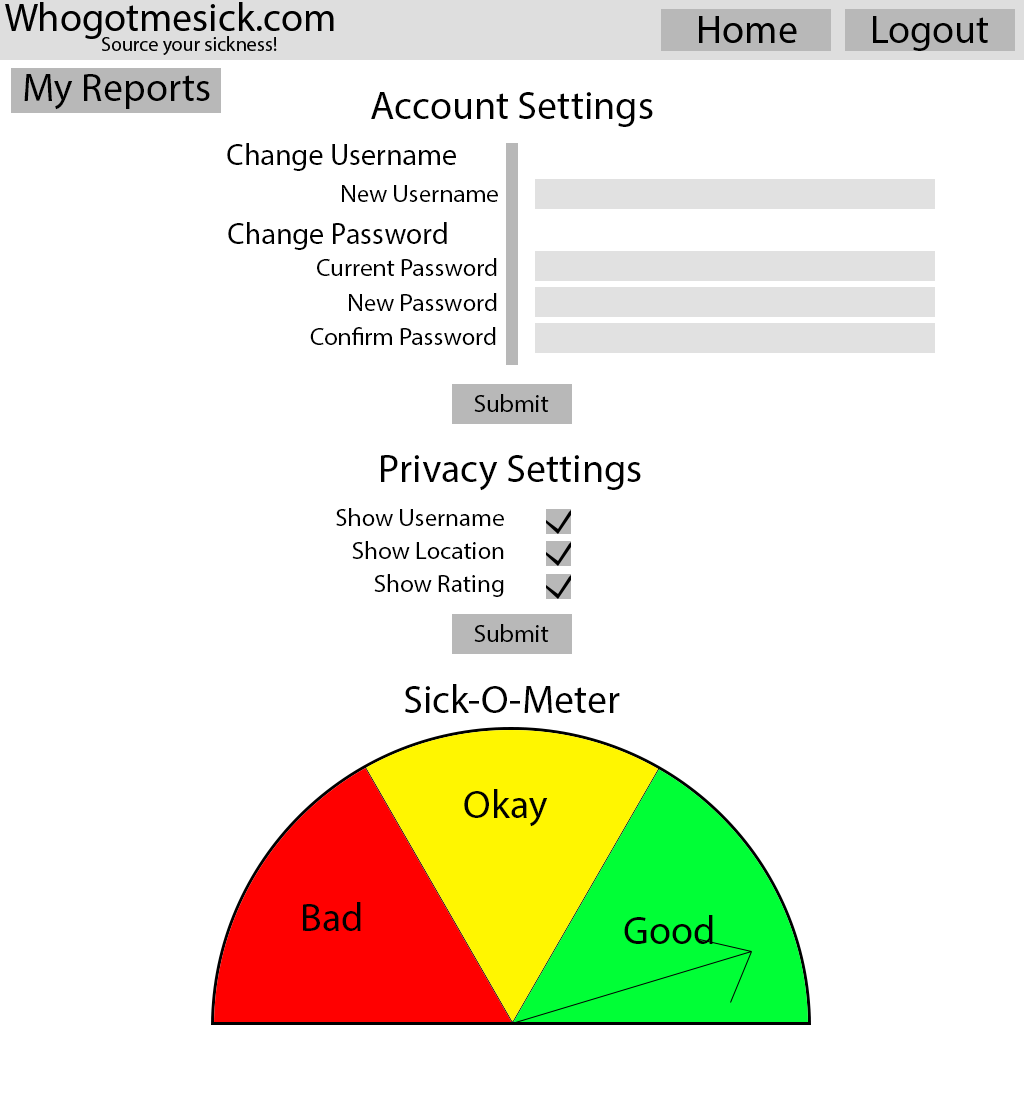
<style>
.page{position:relative;width:1024px;height:1100px;background:#ffffff}
.page>*{position:absolute;margin:0}
.t1{font:40px "MyriadPro-Regular";color:#000000}
.t2{font:30px "MyriadPro-Regular";color:#000000}
.t3{font:25px "MyriadPro-Regular";color:#000000}
</style>
<div class="page">
<p class="t1" style="left:24px;top:74px;width:186px;height:36px">My Reports</p>
<p class="t1" style="left:371px;top:92px;width:282px;height:35px">Account Settings</p>
<p class="t2" style="left:227px;top:143px;width:229px;height:28px">Change Username</p>
<p class="t3" style="left:342px;top:185px;width:156px;height:17px">New Username</p>
<p class="t2" style="left:228px;top:222px;width:219px;height:28px">Change Password</p>
<p class="t3" style="left:317px;top:258px;width:180px;height:18px">Current Password</p>
<p class="t3" style="left:349px;top:293px;width:148px;height:18px">New Password</p>
<p class="t3" style="left:310px;top:327px;width:186px;height:18px">Confirm Password</p>
<p class="t1" style="left:381px;top:455px;width:260px;height:36px">Privacy Settings</p>
<p class="t3" style="left:336px;top:508px;width:168px;height:18px">Show Username</p>
<p class="t3" style="left:352px;top:541px;width:152px;height:18px">Show Location</p>
<p class="t3" style="left:374px;top:574px;width:130px;height:23px">Show Rating</p>
<p class="t1" style="left:405px;top:684px;width:215px;height:29px">Sick-O-Meter</p>
<p class="t1" style="left:464px;top:789px;width:84px;height:38px">Okay</p>
<p class="t1" style="left:303px;top:902px;width:58px;height:29px">Bad</p>
<p class="t1" style="left:624px;top:915px;width:89px;height:29px">Good</p>
</div>
